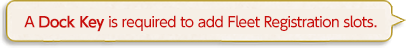
<style>
.page{position:relative;width:406px;height:48px;background:#f6efe6}
.page>*{position:absolute;margin:0}
.t1{font:14px "UDShinGoPro-Medium";letter-spacing:-0.04em;color:#ca0f0c}
.t2{font:14px "UDShinGoPro-Medium";letter-spacing:-0.04em;color:#ca0f0c;font-weight:bold}
</style>
<div class="page">
<p class="t1" style="left:24px;top:15px;width:353px;height:17px">A <span class="t2">Dock Key</span> is required to add Fleet Registration slots.</p>
</div>
